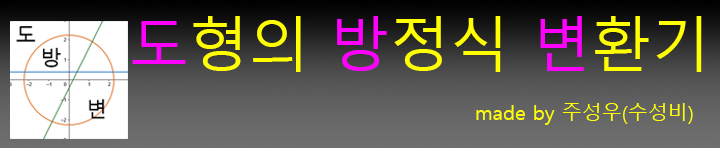
<style>
.page{position:relative;width:720px;height:148px}
.page>*{position:absolute;margin:0}
.t1{font:60px "MalgunGothic";color:#ffff00}
.t2{font:60px "MalgunGothic";color:#ff00ff}
.t3{font:20px "MalgunGothic";color:#ffff00}
</style>
<div class="page">
<p class="t1" style="left:132px;top:16px;width:570px;height:56px"><span class="t2">도</span>형의 <span class="t2">방</span>정식 <span class="t2">변</span>환기</p>
<p class="t3" style="left:476px;top:103px;width:217px;height:22px">made by 주성우(수성비)</p>
</div>
